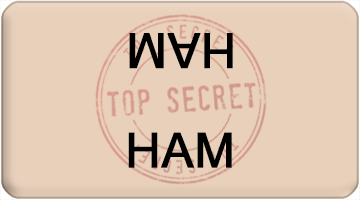
<style>
.page{position:relative;width:360px;height:200px;background:#e8d0bb}
.page>*{position:absolute;margin:0}
.t1{font:48px "ArialMT";color:#000000;font-weight:bold}
</style>
<div class="page">
<p class="t1" style="left:129px;top:33px;width:104px;height:36px;rotate:180deg">HAM</p>
<p class="t1" style="left:128px;top:132px;width:104px;height:36px">HAM</p>
</div>
